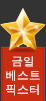
<style>
.page{position:relative;width:46px;height:101px;background:#333333}
.page>*{position:absolute;margin:0}
.t1{font:11.8px "Dotum";color:#ffffff}
</style>
<div class="page">
<p class="t1" style="left:6px;top:56px;width:34px;height:40px;text-align:center">금일<br>베스트<br>픽스터</p>
</div>
